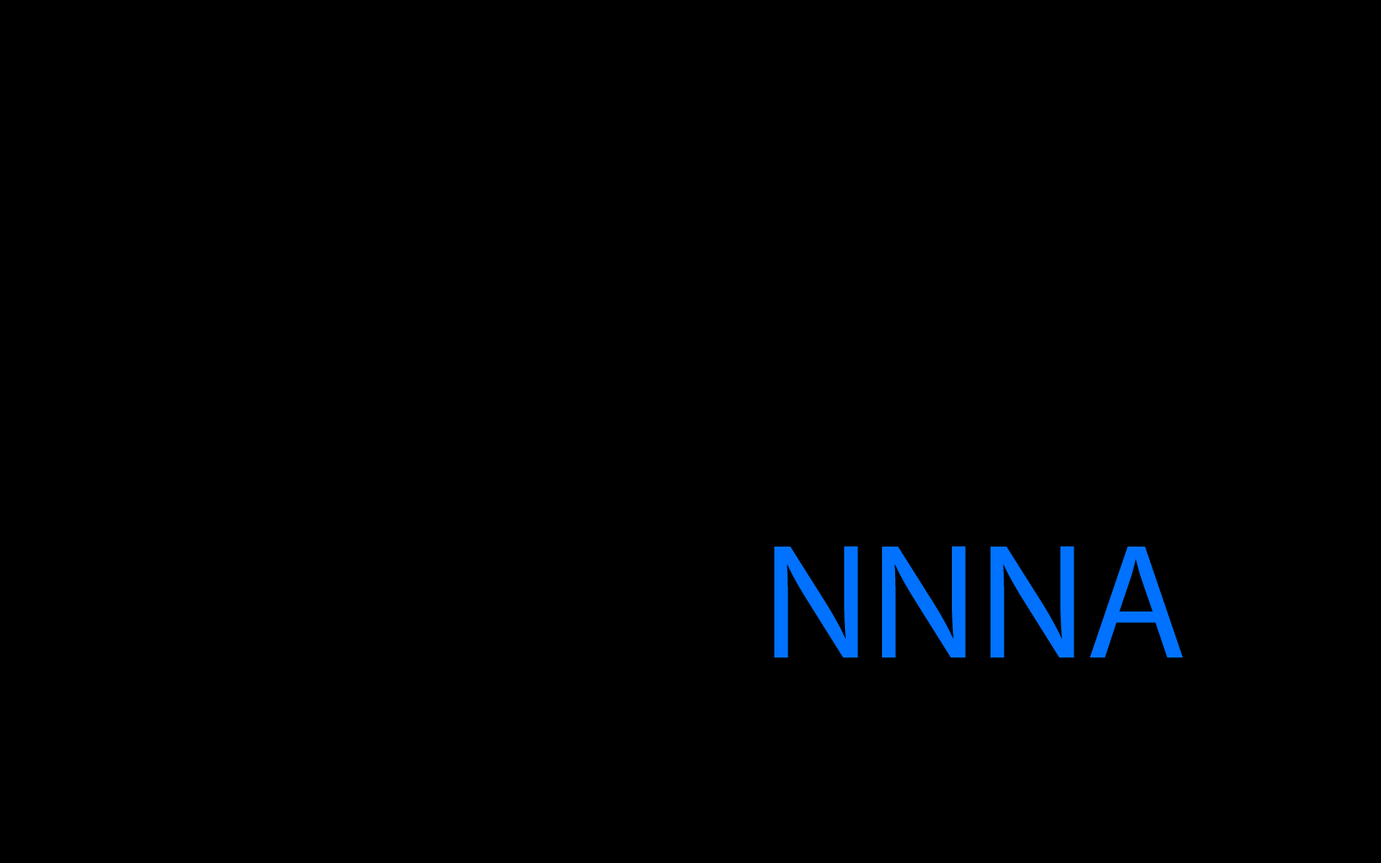
<style>
.page{position:relative;width:1381px;height:863px;background:#000000}
.page>*{position:absolute;margin:0}
.t1{font:164.4px "MyriadPro-Regular";color:#0072ff}
</style>
<div class="page">
<p class="t1" style="left:774px;top:546px;width:409px;height:112px">NNNA</p>
</div>
